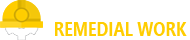
<style>
.page{position:relative;width:190px;height:40px;background:#ffffff}
.page>*{position:absolute;margin:0}
.t1{font:20px "SegoeUI-Bold";color:#ffcd00;scale:0.8 1}
</style>
<div class="page">
<p class="t1" style="left:55px;top:22px;width:132px;height:14px">REMEDIAL WORK</p>
</div>
